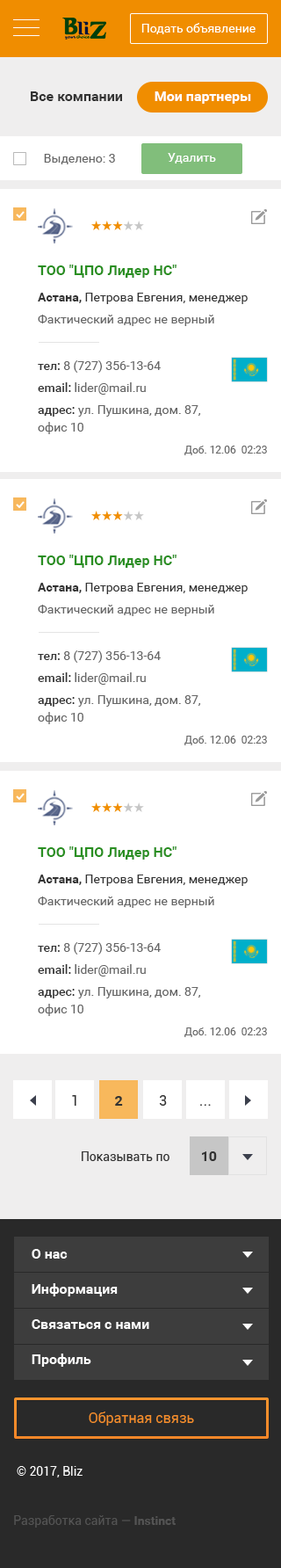
<style>
.page{position:relative;width:281px;height:1568px;background:#ffffff}
.page>*{position:absolute;margin:0}
.t1{font:14.1px "Roboto-Bold";color:#333333}
.t2{font:14.1px "Roboto-Bold";color:#ffffff}
.t3{font:12.3px "Roboto-Regular";color:#666666}
.t4{font:12.3px "Roboto-Regular";color:#ffffff}
.t5{font:12.3px/17.6px "Roboto-Regular";color:#666666}
.t6{font:14.1px/22.9px "Roboto-Bold";color:#2a8f22}
.t7{font:12.3px/17.6px "Roboto-Bold";color:#333333}
.t8{font:12.3px/17.6px "Roboto-Regular";color:#333333}
.t9{font:12.3px/17.6px "Roboto-Medium";color:#333333}
.t10{font:10.5px "Roboto-Regular";color:#666666}
</style>
<div class="page">
<p class="t1" style="left:31px;top:91px;width:220px;height:13px">Все компании         <span class="t2">Мои партнеры</span></p>
<p class="t3" style="left:44px;top:154px;width:71px;height:10px">Выделено: 3</p>
<p class="t4" style="left:168px;top:153px;width:48px;height:10px">Удалить</p>
<p class="t5" style="left:38px;top:265px;width:210px;height:61px"><span class="t6">ТОО "ЦПО Лидер НС"<br></span><span class="t7">Астана,</span><span class="t8"> Петрова Евгения, менеджер<br></span>Фактический адрес не верный</p>
<p class="t5" style="left:38px;top:360px;width:162px;height:74px"><span class="t9">тел: </span>8 (727) 356-13-64<br><span class="t9">email:</span> lider@mail.ru<br><span class="t9">адрес: </span>ул. Пушкина, дом. 87, офис 10</p>
<p class="t10" style="left:185px;top:446px;width:82px;height:9px">Доб. 12.06  02:23</p>
<p class="t5" style="left:38px;top:555px;width:210px;height:61px"><span class="t6">ТОО "ЦПО Лидер НС"<br></span><span class="t7">Астана,</span><span class="t8"> Петрова Евгения, менеджер<br></span>Фактический адрес не верный</p>
<p class="t5" style="left:38px;top:650px;width:162px;height:74px"><span class="t9">тел: </span>8 (727) 356-13-64<br><span class="t9">email:</span> lider@mail.ru<br><span class="t9">адрес: </span>ул. Пушкина, дом. 87, офис 10</p>
<p class="t10" style="left:185px;top:736px;width:82px;height:9px">Доб. 12.06  02:23</p>
<p class="t5" style="left:38px;top:846px;width:210px;height:62px"><span class="t6">ТОО "ЦПО Лидер НС"<br></span><span class="t7">Астана,</span><span class="t8"> Петрова Евгения, менеджер<br></span>Фактический адрес не верный</p>
<p class="t5" style="left:38px;top:942px;width:162px;height:74px"><span class="t9">тел: </span>8 (727) 356-13-64<br><span class="t9">email:</span> lider@mail.ru<br><span class="t9">адрес: </span>ул. Пушкина, дом. 87, офис 10</p>
<p class="t10" style="left:185px;top:1027px;width:82px;height:10px">Доб. 12.06  02:23</p>
</div>
